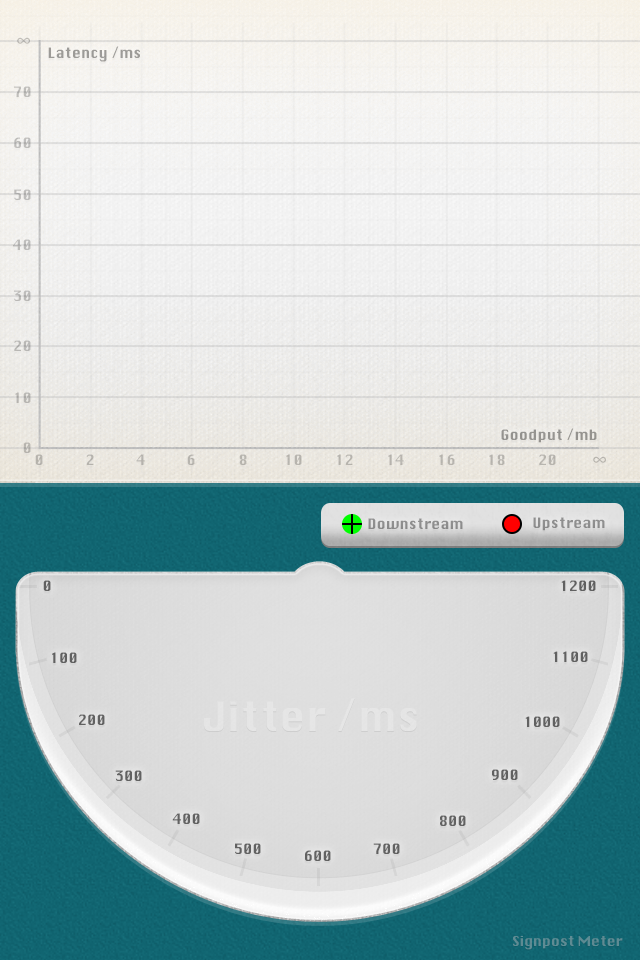
<style>
.page{position:relative;width:640px;height:960px}
.page>*{position:absolute;margin:0}
.t1{font:13.9px "Silom";color:#bebcb7}
.t2{font:13.9px "Silom";color:#9c9b97}
.t3{font:13.9px "Silom";color:#bfbeba}
.t4{font:13.9px "Silom";color:#bebebb}
.t5{font:13.9px "Silom";color:#bdbdbb}
.t6{font:13.9px "Silom";color:#bcbbbb}
.t7{font:13.9px "Silom";color:#bab9b7}
.t8{font:13.9px "Silom";color:#b9b8b6}
.t9{font:13.9px "Silom";color:#b8b6b3}
.t10{font:13.9px "Silom";color:#959390}
.t11{font:13.9px "Silom";color:#b7b4ae}
.t12{font:13.9px "Silom";color:#b6b3ae}
.t13{font:13.9px "Silom";color:#b5b3ac}
.t14{font:13.9px "Silom";color:#b7b4af}
.t15{font:13.9px "Silom";color:#b6b4af}
.t16{font:13.9px "Silom";color:#b6b3ad}
.t17{font:13.9px "Silom";color:#b6b4ae}
.t18{font:13.9px "Silom";color:#b8b5af}
.t19{font:13.9px "Silom";color:#8e8e8e}
.t20{font:13.9px "Silom";color:#606060}
.t21{font:13.9px "Silom";color:#616161}
.t22{font:39.3px "Silom";color:#e5e5e5}
.t23{font:13.9px "Silom";color:#626262}
.t24{font:13.4px "Silom";color:#5e8c94}
</style>
<div class="page">
<p class="t1" style="left:17px;top:37px;width:13px;height:7px">∞</p>
<p class="t2" style="left:48px;top:46px;width:92px;height:16px">Latency /ms</p>
<p class="t3" style="left:14px;top:86px;width:17px;height:11px">70</p>
<p class="t4" style="left:14px;top:137px;width:17px;height:11px">60</p>
<p class="t5" style="left:14px;top:189px;width:17px;height:11px">50</p>
<p class="t6" style="left:13px;top:239px;width:18px;height:11px">40</p>
<p class="t7" style="left:14px;top:290px;width:17px;height:11px">30</p>
<p class="t8" style="left:14px;top:340px;width:17px;height:11px">20</p>
<p class="t9" style="left:15px;top:392px;width:16px;height:11px">10</p>
<p class="t10" style="left:501px;top:428px;width:96px;height:15px">Goodput /mb</p>
<p class="t11" style="left:23px;top:442px;width:8px;height:11px">0</p>
<p class="t11" style="left:35px;top:454px;width:8px;height:11px">0</p>
<p class="t12" style="left:86px;top:454px;width:8px;height:11px">2</p>
<p class="t13" style="left:136px;top:454px;width:9px;height:11px">4</p>
<p class="t14" style="left:187px;top:454px;width:8px;height:11px">6</p>
<p class="t15" style="left:239px;top:454px;width:8px;height:11px">8</p>
<p class="t15" style="left:286px;top:454px;width:16px;height:11px">10</p>
<p class="t16" style="left:337px;top:454px;width:16px;height:11px">12</p>
<p class="t17" style="left:388px;top:454px;width:16px;height:11px">14</p>
<p class="t18" style="left:439px;top:454px;width:16px;height:11px">16</p>
<p class="t12" style="left:489px;top:454px;width:16px;height:11px">18</p>
<p class="t14" style="left:539px;top:454px;width:17px;height:11px">20</p>
<p class="t17" style="left:593px;top:456px;width:13px;height:7px">∞</p>
<p class="t19" style="left:368px;top:518px;width:95px;height:11px">Downstream</p>
<p class="t19" style="left:533px;top:517px;width:72px;height:14px">Upstream</p>
<p class="t20" style="left:43px;top:580px;width:8px;height:11px">0</p>
<p class="t21" style="left:561px;top:580px;width:35px;height:11px">1200</p>
<p class="t21" style="left:52px;top:652px;width:25px;height:11px">100</p>
<p class="t21" style="left:553px;top:651px;width:35px;height:11px">1100</p>
<p class="t22" style="left:204px;top:698px;width:213px;height:33px">Jitter /ms</p>
<p class="t21" style="left:79px;top:714px;width:26px;height:11px">200</p>
<p class="t21" style="left:525px;top:716px;width:35px;height:11px">1000</p>
<p class="t21" style="left:115px;top:770px;width:27px;height:11px">300</p>
<p class="t21" style="left:492px;top:769px;width:26px;height:11px">900</p>
<p class="t23" style="left:172px;top:813px;width:28px;height:11px">400</p>
<p class="t23" style="left:440px;top:815px;width:26px;height:11px">800</p>
<p class="t23" style="left:235px;top:843px;width:26px;height:11px">500</p>
<p class="t23" style="left:373px;top:843px;width:27px;height:11px">700</p>
<p class="t23" style="left:305px;top:850px;width:26px;height:11px">600</p>
<p class="t24" style="left:513px;top:936px;width:110px;height:14px">Signpost Meter</p>
</div>
